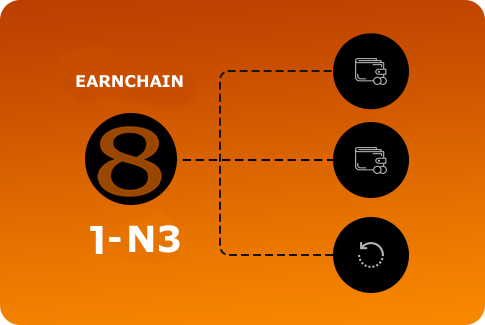
<style>
.page{position:relative;width:485px;height:325px}
.page>*{position:absolute;margin:0}
.t1{font:16px "Verdana-Bold";color:#fefefe}
.t2{font:36px "Verdana-Bold";color:#ffffff}
</style>
<div class="page">
<p class="t1" style="left:76px;top:75px;width:107px;height:13px">EARNCHAIN</p>
<p class="t2" style="left:129px;top:225px;width:51px;height:28px">N3</p>
</div>
